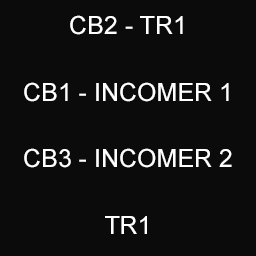
<style>
.page{position:relative;width:256px;height:256px;background:#0b0b0b}
.page>*{position:absolute;margin:0}
.t1{font:25px/66.7px "ArialMT";color:#ffffff}
</style>
<div class="page">
<p class="t1" style="left:24px;top:15px;width:208px;height:219px;text-align:center">CB2 - TR1<br>CB1 - INCOMER 1<br>CB3 - INCOMER 2<br>TR1</p>
</div>
